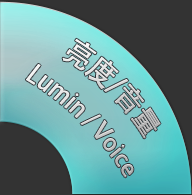
<style>
.page{position:relative;width:192px;height:195px;background:#333333}
.page>*{position:absolute;margin:0}
.t1{font:28.9px "AdobeHeitiStd-Regular";scale:0.91 1}
.t2{font:24.5px "AdobeHeitiStd-Regular";scale:0.91 1}
</style>
<div class="page">
<p class="t1" style="left:62px;top:38px;width:99px;height:101px;rotate:45deg">亮度/音量</p>
<p class="t2" style="left:26px;top:64px;width:108px;height:114px;rotate:45deg">Lumin / Voice</p>
</div>
